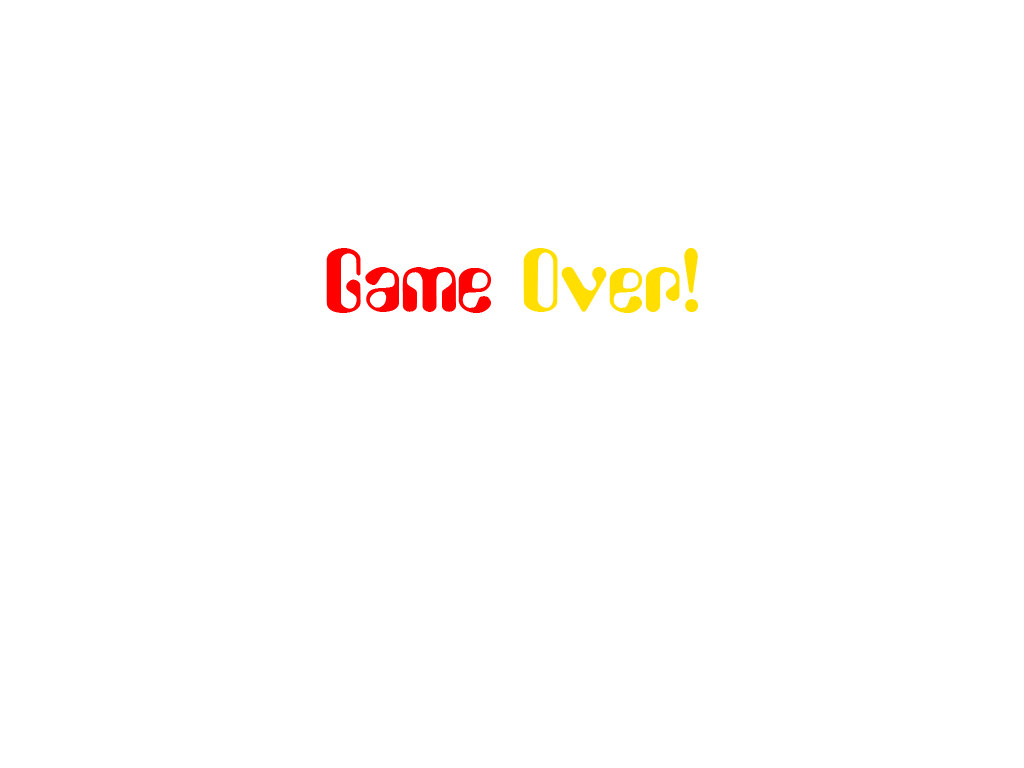
<style>
.page{position:relative;width:1024px;height:768px;background:#ffffff}
.page>*{position:absolute;margin:0}
.t1{font:80px "Asimov";color:#ffde00}
.t2{font:80px "Asimov";color:#ff0000}
</style>
<div class="page">
<p class="t1" style="left:326px;top:248px;width:372px;height:65px"><span class="t2">Game </span>Over!</p>
</div>
